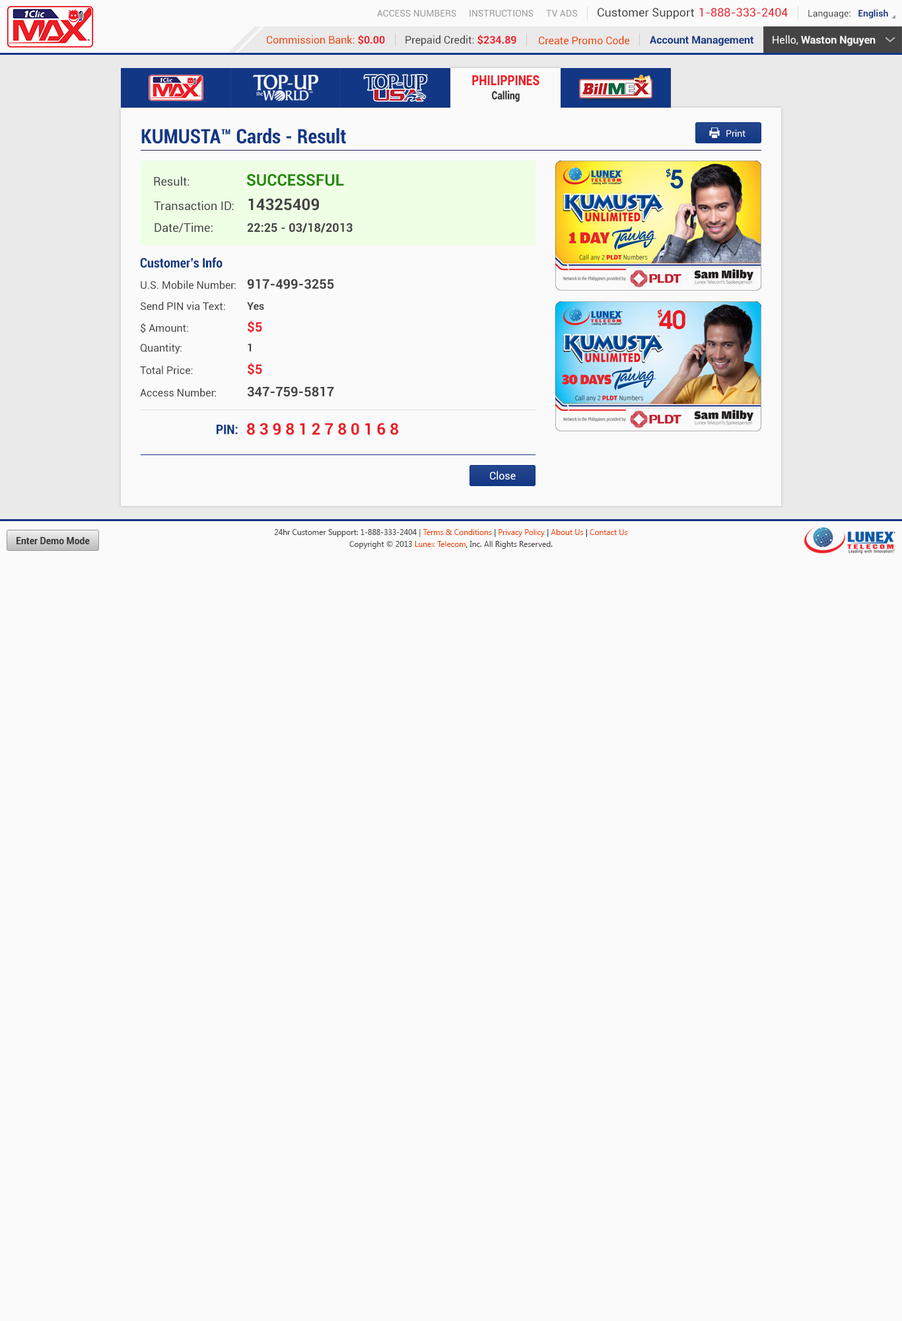
<style>
.page{position:relative;width:902px;height:1321px;background:#fafafa}
.page>*{position:absolute;margin:0}
.t1{font:9.2px "Roboto-Regular";color:#999999}
.t2{font:11.6px "Roboto-Regular";color:#444444}
.t3{font:11.6px "Roboto-Regular";color:#ec2029}
.t4{font:9.2px "Roboto-Regular";color:#444444}
.t5{font:9.2px "Roboto-Bold";color:#123785}
.t6{font:10.6px "Roboto-Regular";color:#ee4400}
.t7{font:10.6px "Roboto-Bold";color:#ec2028}
.t8{font:10.6px "Roboto-Regular";color:#444444}
.t9{font:10.6px "Roboto-Bold";color:#123785}
.t10{font:10.6px "Roboto-Bold";color:#fafafa}
.t11{font:10.6px "Roboto-Regular";color:#fafafa}
.t12{font:14.1px "Roboto-Black";color:#ec2028;scale:0.81 1}
.t13{font:11.3px "Roboto-Black";color:#333333;scale:0.81 1}
.t14{font:19.8px "Roboto-BoldCondensed";color:#123785}
.t15{font:9.2px "Roboto-Regular";color:#fafafa}
.t16{font:15.9px "Roboto-Bold";color:#228800}
.t17{font:11.9px "Roboto-Regular";color:#444444}
.t18{font:15.9px "Roboto-Bold";color:#444444}
.t19{font:11.9px "Roboto-Bold";color:#444444}
.t20{font:13.2px "Roboto-BoldCondensed";color:#123785}
.t21{font:13.2px "Roboto-Bold";color:#444444}
.t22{font:10.6px "Roboto-Bold";color:#444444}
.t23{font:13.2px "Roboto-Bold";color:#ec2028}
.t24{font:15.9px "Roboto-Bold";color:#eb1e27}
.t25{font:10.6px "Roboto-Regular";color:#ffffff}
.t26{font:7.9px/11.9px "SegoeUI";color:#444444}
.t27{font:7.9px/11.9px "SegoeUI";color:#ee4400}
.t28{font:7.9px/11.9px "SegoeUI";color:#333333}
.t29{font:9.2px "Roboto-Bold";color:#333333}
</style>
<div class="page">
<p class="t1" style="left:377px;top:10px;width:80px;height:7px">ACCESS NUMBERS</p>
<p class="t1" style="left:470px;top:10px;width:64px;height:7px">INSTRUCTIONS</p>
<p class="t1" style="left:546px;top:10px;width:31px;height:7px">TV ADS</p>
<p class="t2" style="left:598px;top:8px;width:96px;height:11px">Customer Support</p>
<p class="t3" style="left:700px;top:8px;width:88px;height:9px">1-888-333-2404</p>
<p class="t4" style="left:809px;top:9px;width:80px;height:9px">Language:   <span class="t5">English</span></p>
<p class="t6" style="left:267px;top:35px;width:118px;height:10px">Commission Bank: <span class="t7">$0.00</span></p>
<p class="t8" style="left:406px;top:35px;width:111px;height:11px">Prepaid Credit: <span class="t7">$234.89</span></p>
<p class="t6" style="left:539px;top:36px;width:91px;height:9px">Create Promo Code</p>
<p class="t9" style="left:650px;top:36px;width:104px;height:10px">Account Management</p>
<p class="t10" style="left:773px;top:35px;width:103px;height:11px"><span class="t11">Hello, </span>Waston Nguyen</p>
<p class="t12" style="left:472px;top:75px;width:68px;height:11px">PHILIPPINES</p>
<p class="t13" style="left:492px;top:91px;width:28px;height:11px">Calling</p>
<p class="t14" style="left:141px;top:128px;width:205px;height:16px">KUMUSTA™ Cards - Result</p>
<p class="t15" style="left:727px;top:129px;width:19px;height:8px">Print</p>
<p class="t16" style="left:247px;top:174px;width:97px;height:12px">SUCCESSFUL</p>
<p class="t17" style="left:154px;top:176px;width:36px;height:10px">Result:</p>
<p class="t17" style="left:154px;top:201px;width:80px;height:10px">Transaction ID:</p>
<p class="t18" style="left:248px;top:198px;width:71px;height:13px">14325409</p>
<p class="t17" style="left:155px;top:223px;width:58px;height:10px">Date/Time:</p>
<p class="t19" style="left:247px;top:223px;width:106px;height:10px">22:25 - 03/18/2013</p>
<p class="t20" style="left:140px;top:257px;width:83px;height:11px">Customer’s Info</p>
<p class="t8" style="left:141px;top:280px;width:95px;height:9px">U.S. Mobile Number:</p>
<p class="t21" style="left:247px;top:279px;width:87px;height:10px">917-499-3255</p>
<p class="t8" style="left:141px;top:301px;width:84px;height:10px">Send PIN via Text:</p>
<p class="t22" style="left:247px;top:302px;width:17px;height:8px">Yes</p>
<p class="t8" style="left:141px;top:323px;width:47px;height:10px">$ Amount:</p>
<p class="t23" style="left:248px;top:320px;width:14px;height:13px">$5</p>
<p class="t8" style="left:141px;top:343px;width:41px;height:11px">Quantity:</p>
<p class="t22" style="left:248px;top:344px;width:4px;height:7px">1</p>
<p class="t8" style="left:140px;top:365px;width:53px;height:10px">Total Price:</p>
<p class="t23" style="left:248px;top:363px;width:14px;height:12px">$5</p>
<p class="t8" style="left:140px;top:388px;width:76px;height:9px">Access Number:</p>
<p class="t21" style="left:248px;top:386px;width:86px;height:11px">347-759-5817</p>
<p class="t20" style="left:217px;top:425px;width:21px;height:10px">PIN:</p>
<p class="t24" style="left:247px;top:423px;width:152px;height:12px">8 3 9 8 1 2 7 8 0 1 6 8</p>
<p class="t25" style="left:490px;top:471px;width:26px;height:9px">Close</p>
<p class="t26" style="left:274px;top:529px;width:354px;height:20px;text-align:center">24hr Customer Support: 1-888-333-2404 | <span class="t27">Terms &amp; Conditions</span><span class="t28"> | </span><span class="t27">Privacy Policy</span><span class="t28"> | </span><span class="t27">About Us</span><span class="t28"> | </span><span class="t27">Contact Us<br></span>Copyright © 2013 <span class="t27">Lunex Telecom</span><span class="t28">,</span> Inc. All Rights Reserved.</p>
<p class="t29" style="left:17px;top:537px;width:73px;height:7px">Enter Demo Mode</p>
</div>
